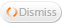
<style>
.page{position:relative;width:62px;height:24px}
.page>*{position:absolute;margin:0}
.t1{font:11px "LucidaGrande";letter-spacing:-0.05em;color:#b1b1b1}
</style>
<div class="page">
<p class="t1" style="left:19px;top:8px;width:38px;height:8px">Dismiss</p>
</div>
